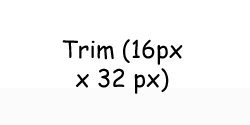
<style>
.page{position:relative;width:250px;height:125px;background:#ffffff}
.page>*{position:absolute;margin:0}
.t1{font:24px "ComicSansMS";color:#000000}
</style>
<div class="page">
<p class="t1" style="left:62px;top:39px;width:121px;height:55px;text-align:center">Trim (16px<br>x 32 px)</p>
</div>
